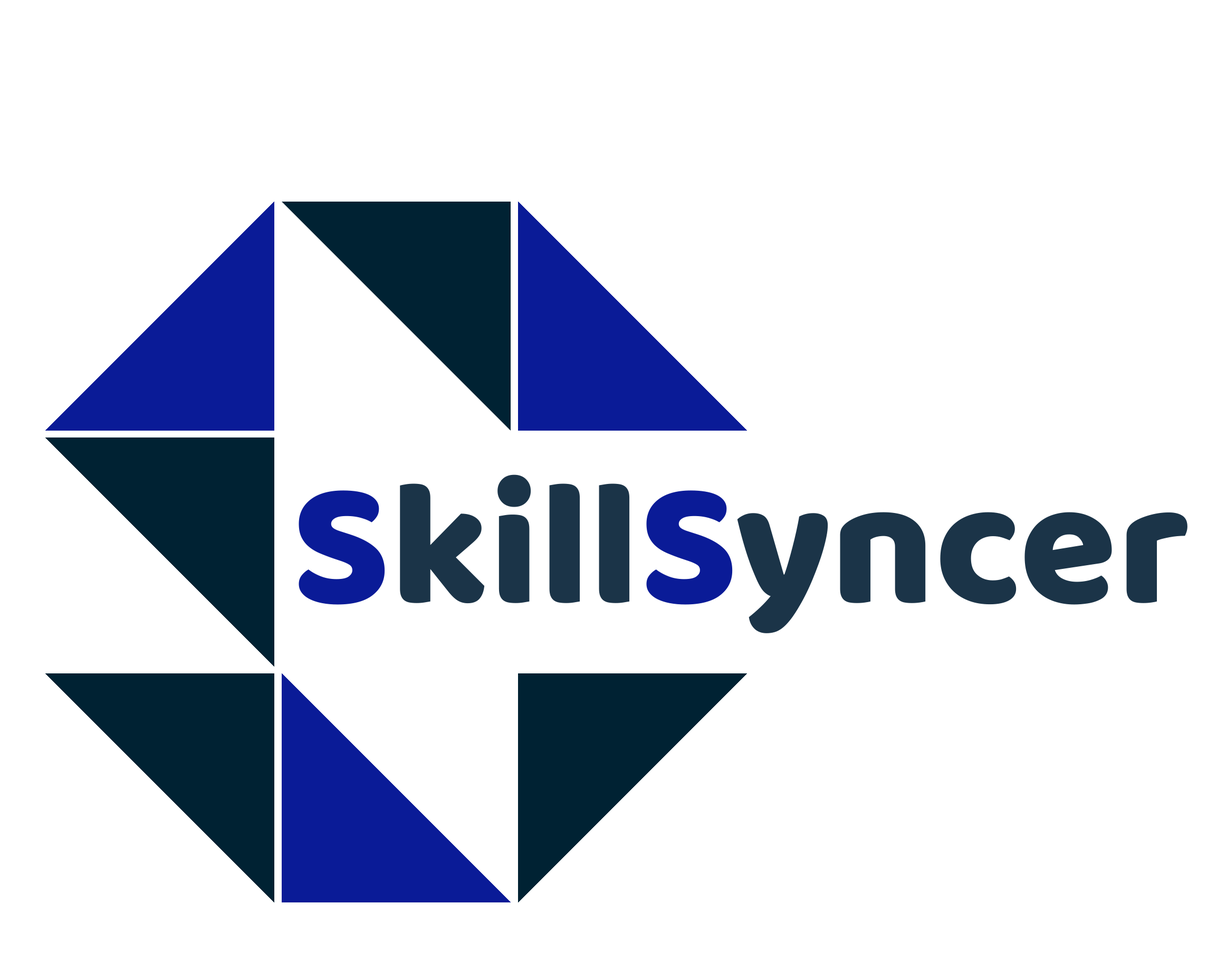
<style>
.page{position:relative;width:1217px;height:980px;background:#ffffff}
.page>*{position:absolute;margin:0}
.t1{font:178.3px "Baloo-Regular";color:#1b3448}
.t2{font:178.3px "Baloo-Regular";color:#0a1b97}
</style>
<div class="page">
<p class="t1" style="left:299px;top:474px;width:889px;height:159px"><span class="t2">S</span>kill<span class="t2">S</span>yncer</p>
</div>
